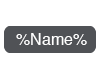
<style>
.page{position:relative;width:100px;height:79px;background:#ffffff}
.page>*{position:absolute;margin:0}
.t1{font:16px "Helvetica";color:#ffffff}
</style>
<div class="page">
<p class="t1" style="left:16px;top:33px;width:71px;height:12px">%Name%</p>
</div>
